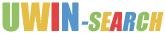
<style>
.page{position:relative;width:165px;height:33px;background:#ffffff}
.page>*{position:absolute;margin:0}
.t1{font:36px "Impact";color:#86bb54}
.t2{font:36px "Impact";color:#e3b732}
.t3{font:36px "Impact";color:#de2e2e}
.t4{font:36px "Impact";color:#438ac5}
.t5{font:24px "Impact";color:#448cc7;font-style:italic}
.t6{font:24px "Impact";color:#82b74f;font-style:italic}
.t7{font:24px "Impact";color:#e3b732;font-style:italic}
.t8{font:24px "Impact";color:#df2e2f;font-style:italic}
.t9{font:24px "Impact";color:#4188c4;font-style:italic}
.t10{font:24px "Impact";color:#82b850;font-style:italic}
.t11{font:24px "Impact";color:#e4b832;font-style:italic}
</style>
<div class="page">
<p class="t1" style="left:2px;top:2px;width:162px;height:30px">U<span class="t2">W</span><span class="t3">I</span><span class="t4">N</span><span class="t5">-</span><span class="t6">S</span><span class="t7">E</span><span class="t8">A</span><span class="t9">R</span><span class="t10">C</span><span class="t11">H</span></p>
</div>
